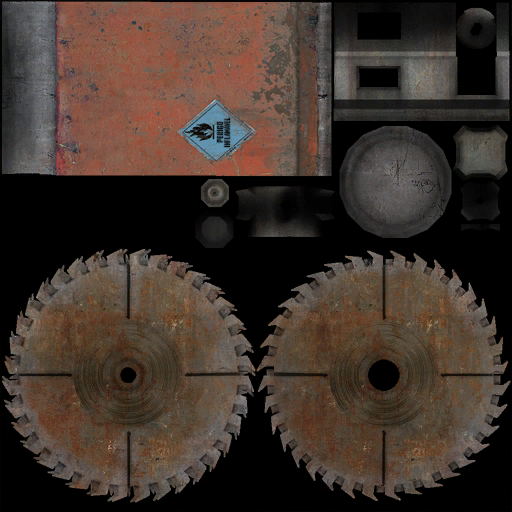
<style>
.page{position:relative;width:512px;height:512px;background:#000000}
.page>*{position:absolute;margin:0}
.t1{font:8px "AgencyGothicCT-Light";letter-spacing:0.06em;color:#16181b;font-weight:bold;scale:1.1 1}
.t2{font:8px "AgencyGothicCT-Light";color:#1c1e21;font-weight:bold;scale:1.1 1}
</style>
<div class="page">
<p class="t1" style="left:217px;top:122px;width:6px;height:21px;rotate:-90deg">perigo</p>
<p class="t2" style="left:223px;top:117px;width:7px;height:30px;rotate:-90deg">INFLAMÁVEL</p>
</div>
